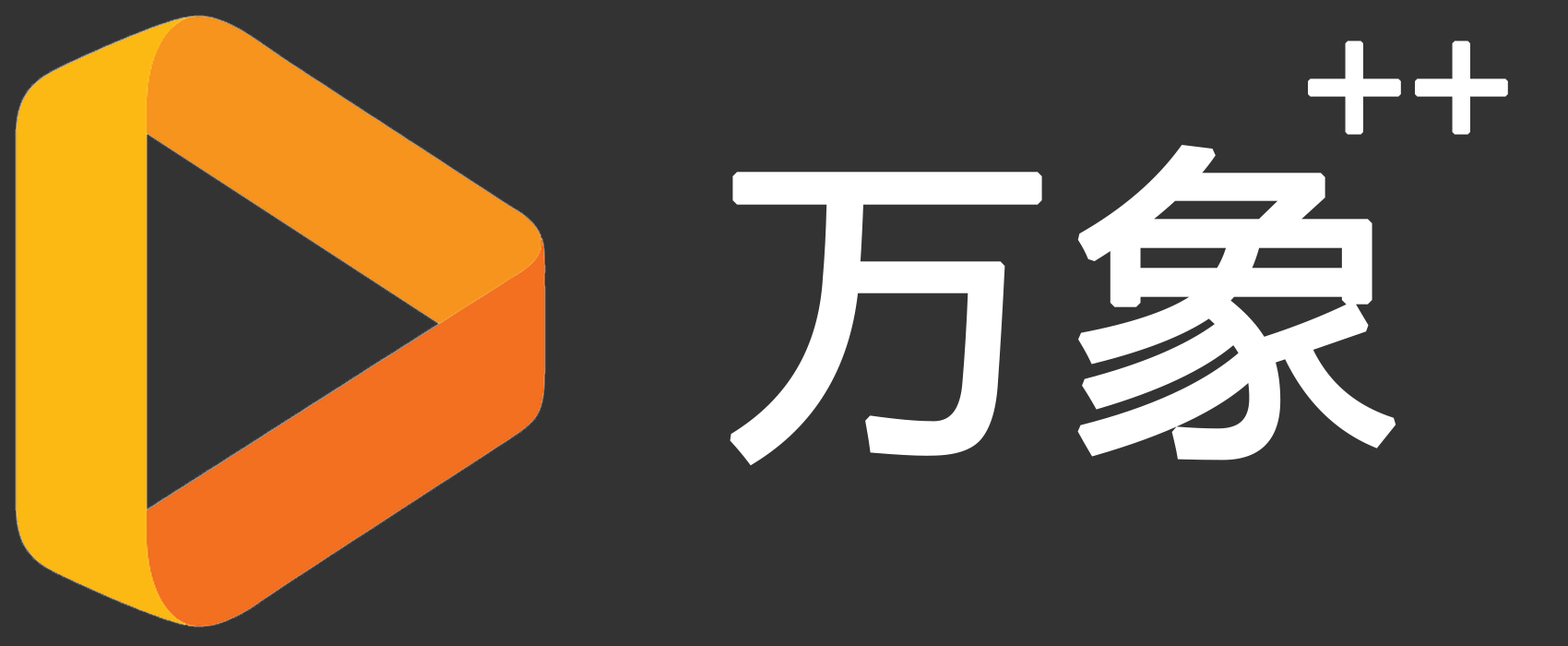
<style>
.page{position:relative;width:1568px;height:646px;background:#333333}
.page>*{position:absolute;margin:0}
.t1{font:177.1px "MicrosoftYaHei";letter-spacing:-0.165em;color:#ffffff;font-weight:bold}
.t2{font:319.1px "MicrosoftYaHei";letter-spacing:0.07em;color:#ffffff;font-weight:bold}
</style>
<div class="page">
<p class="t1" style="left:1308px;top:41px;width:200px;height:94px">++</p>
<p class="t2" style="left:730px;top:145px;width:666px;height:321px">万象</p>
</div>
